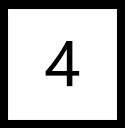
<style>
.page{position:relative;width:125px;height:128px;background:#ffffff}
.page>*{position:absolute;margin:0}
.t1{font:60px "MicrosoftYaHei";color:#000000}
</style>
<div class="page">
<p class="t1" style="left:45px;top:41px;width:35px;height:46px">4</p>
</div>
